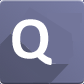
<style>
.page{position:relative;width:84px;height:84px;background:#6d7094}
.page>*{position:absolute;margin:0}
.t1{font:60px "Calibri-Bold";color:#ffffff}
</style>
<div class="page">
<p class="t1" style="left:12px;top:19px;width:40px;height:46px">Q</p>
</div>
